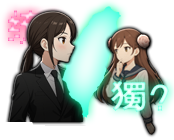
<style>
.page{position:relative;width:174px;height:140px;background:#ffffff}
.page>*{position:absolute;margin:0}
.t1{font:39px "FZZJ-MSHLFW"}
</style>
<div class="page">
<p class="t1" style="left:111px;top:81px;width:58px;height:31px">独?</p>
</div>
